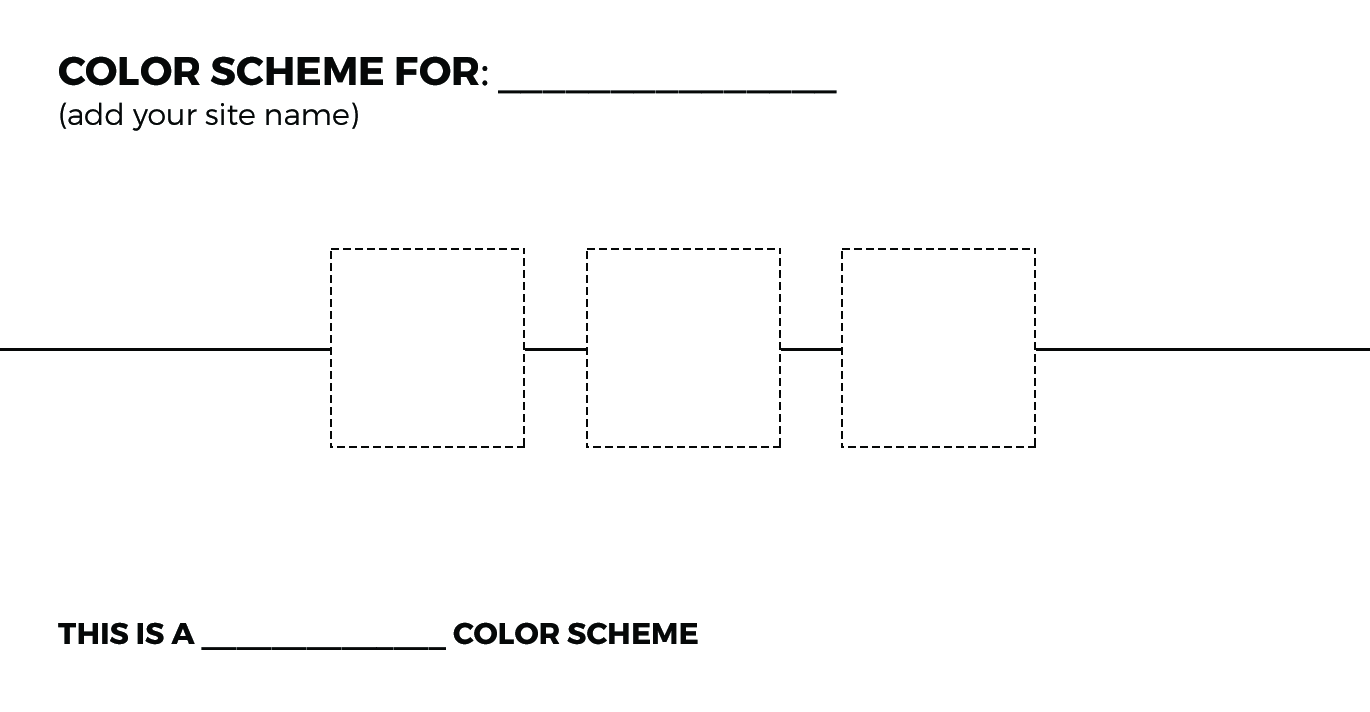
<style>
.page{position:relative;width:1370px;height:712px;background:#ffffff}
.page>*{position:absolute;margin:0}
.t1{font:30px/40px "Montserrat-Light";color:#060808}
.t2{font:40px/40px "Montserrat-Bold";color:#060808;text-transform:uppercase}
.t3{font:40px/40px "SourceSansPro-Regular";color:#060808}
.t4{font:40px/40px "Montserrat-Regular";color:#060808}
.t5{font:30px "Montserrat-Bold";color:#060808;text-transform:uppercase}
.t6{font:30px "Montserrat-Bold";color:#060808}
</style>
<div class="page">
<p class="t1" style="left:59px;top:56px;width:778px;height:75px"><span class="t2">Color Scheme for</span><span class="t3">: </span><span class="t4">_______________<br></span>(add your site name)</p>
<p class="t5" style="left:58px;top:622px;width:640px;height:28px">THIS IS A ______________ <span class="t6">COLOR SCHEME</span></p>
</div>
